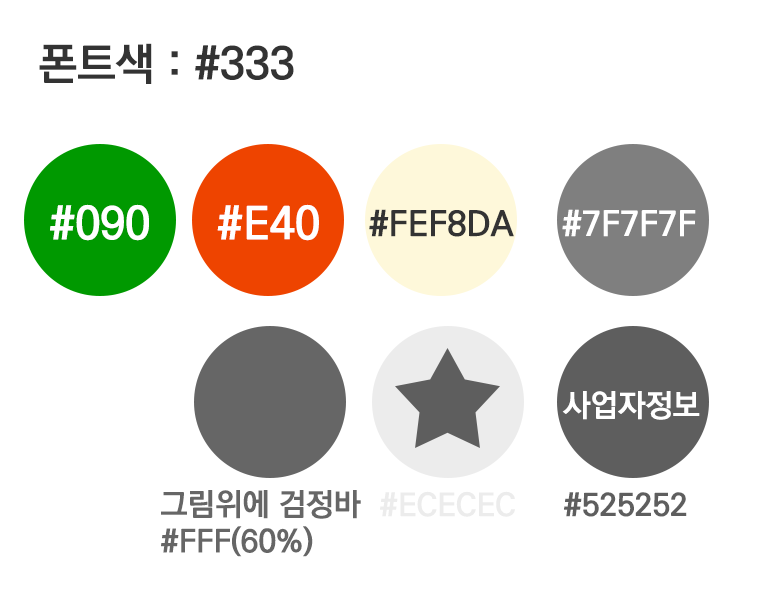
<style>
.page{position:relative;width:772px;height:596px;background:#ffffff}
.page>*{position:absolute;margin:0}
.t1{font:44.4px "KoPubDotumBold";color:#333333;text-transform:uppercase}
.t2{font:44.4px "KoPubDotumBold";color:#ffffff}
.t3{font:34.1px "KoPubDotumBold";color:#333333;text-transform:uppercase}
.t4{font:34.1px "KoPubDotumBold";color:#ffffff;text-transform:uppercase}
.t5{font:31.1px "KoPubDotumBold";color:#ffffff;text-transform:uppercase}
.t6{font:31.1px "KoPubDotumBold";color:#666666;text-transform:uppercase}
.t7{font:31.1px "KoPubDotumBold";color:#ececec;text-transform:uppercase}
.t8{font:31.1px "KoPubDotumBold";color:#5e5e5e;text-transform:uppercase}
</style>
<div class="page">
<p class="t1" style="left:39px;top:43px;width:255px;height:41px">폰트색 : #333</p>
<p class="t2" style="left:50px;top:204px;width:99px;height:37px">#090</p>
<p class="t2" style="left:217px;top:204px;width:102px;height:37px">#E40</p>
<p class="t3" style="left:369px;top:209px;width:145px;height:28px">#fef8da</p>
<p class="t4" style="left:562px;top:209px;width:134px;height:28px">#7f7f7f</p>
<p class="t5" style="left:562px;top:391px;width:138px;height:29px">사업자정보</p>
<p class="t6" style="left:161px;top:490px;width:200px;height:67px">그림위에 검정바<br>#fff(60%)</p>
<p class="t7" style="left:380px;top:491px;width:135px;height:26px">#ececec</p>
<p class="t8" style="left:564px;top:492px;width:123px;height:25px">#525252</p>
</div>
